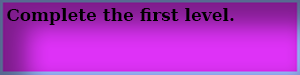
<style>
.page{position:relative;width:300px;height:75px}
.page>*{position:absolute;margin:0}
.t1{font:17px "DejaVuSerif-Bold";color:#000000}
</style>
<div class="page">
<p class="t1" style="left:7px;top:8px;width:227px;height:17px">Complete the first level.</p>
</div>
